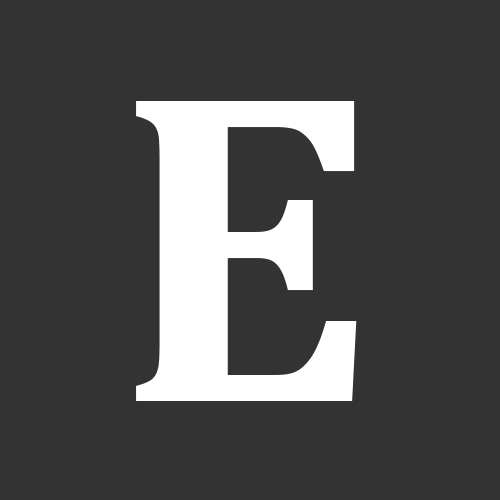
<style>
.page{position:relative;width:500px;height:500px;background:#333333}
.page>*{position:absolute;margin:0}
.t1{font:450px "Cambria-Bold";color:#ffffff}
</style>
<div class="page">
<p class="t1" style="left:136px;top:101px;width:221px;height:300px">E</p>
</div>
